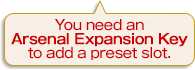
<style>
.page{position:relative;width:195px;height:70px;background:#f7eee5}
.page>*{position:absolute;margin:0}
.t1{font:14px/14px "GothicMB101Pro-Medium";letter-spacing:-0.04em;color:#cc0000;font-weight:bold}
.t2{font:14px/14px "GothicMB101Pro-Medium";letter-spacing:-0.04em;color:#cc0000}
</style>
<div class="page">
<p class="t1" style="left:11px;top:19px;width:177px;height:41px;text-align:center"><span class="t2">You need an<br></span>Arsenal Expansion Key<br><span class="t2">to add a preset slot.</span></p>
</div>
